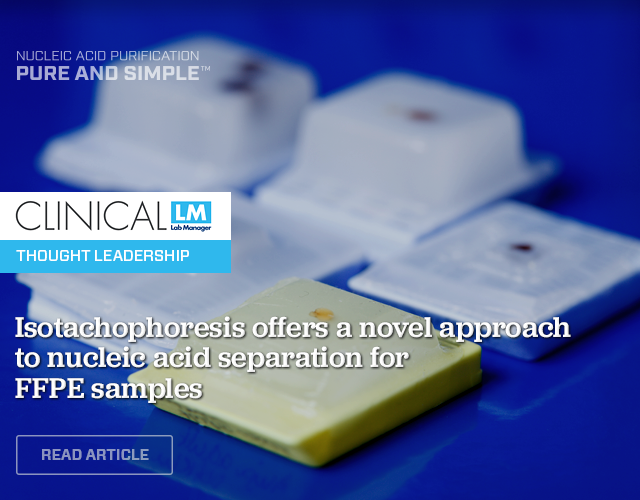
<style>
.page{position:relative;width:640px;height:500px}
.page>*{position:absolute;margin:0}
.t1{font:16px "Forza-Medium";letter-spacing:-0.01em;color:#ffffff;text-transform:uppercase}
.t2{font:29.6px/30.5px "Jubilat-Medium";color:#fdfdfd}
.t3{font:15px "Forza-Bold";letter-spacing:-0.01em;color:#8b94bf;text-transform:uppercase}
</style>
<div class="page">
<p class="t1" style="left:16px;top:250px;width:173px;height:11px">Thought Leadership</p>
<p class="t2" style="left:15px;top:316px;width:556px;height:87px">Isotachophoresis offers a novel approach <br>to nucleic acid separation for <br>FFPE samples</p>
<p class="t3" style="left:42px;top:449px;width:107px;height:11px">Read Article</p>
</div>
